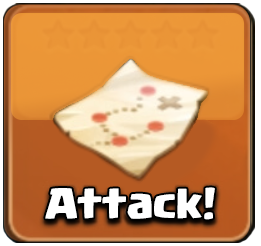
<style>
.page{position:relative;width:261px;height:246px}
.page>*{position:absolute;margin:0}
.t1{font:31.4px "Supercell-Magic";color:#ffffff}
</style>
<div class="page">
<p class="t1" style="left:45px;top:187px;width:170px;height:33px">Attack!</p>
</div>
